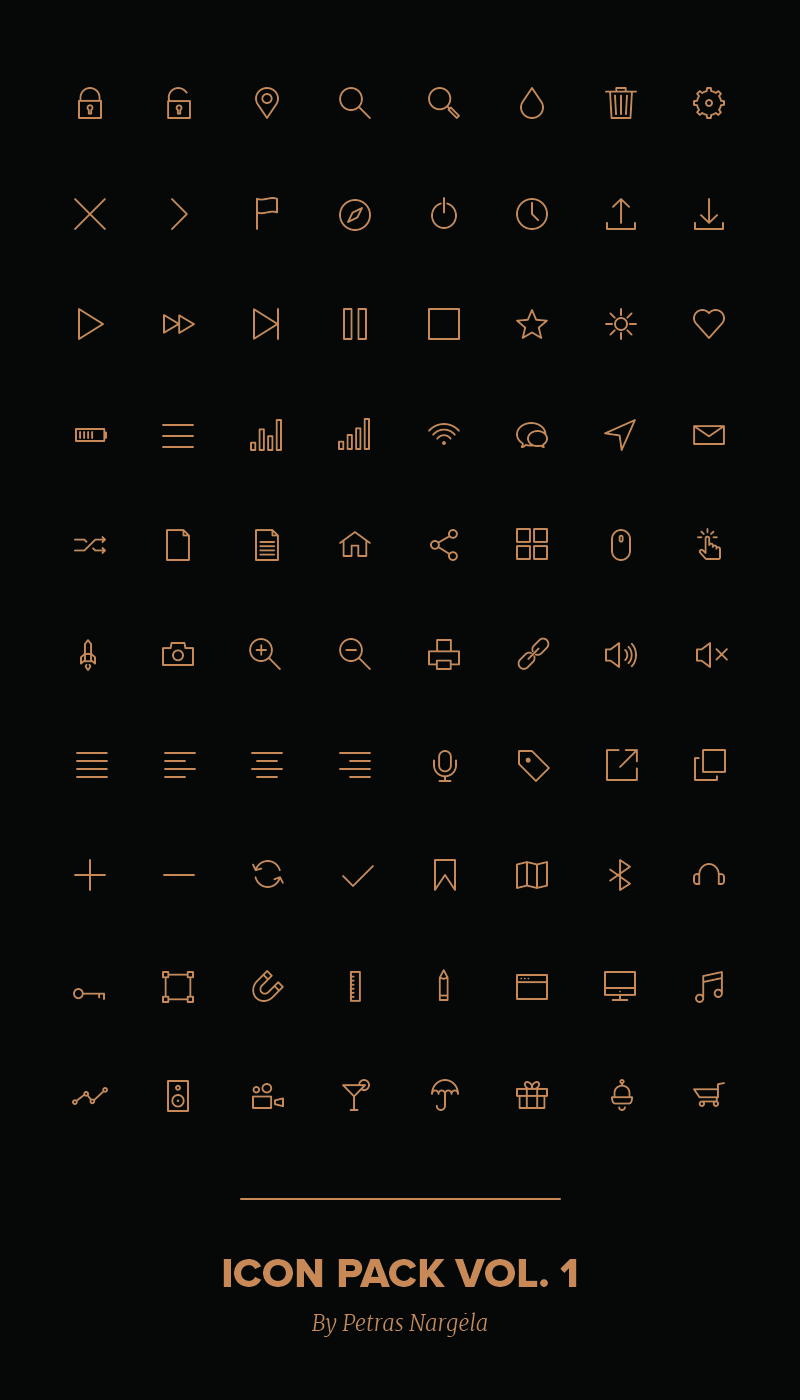
<style>
.page{position:relative;width:800px;height:1400px;background:#060808}
.page>*{position:absolute;margin:0}
.t1{font:22px/44px "Merriweather-LightItalic";color:#c98957}
.t2{font:42px "ProximaNova-Extrabld";color:#c98957}
</style>
<div class="page">
<p class="t1" style="left:223px;top:1259px;width:354px;height:78px;text-align:center"><span class="t2">ICON PACK VOL. 1<br></span>By Petras Nargėla</p>
</div>
